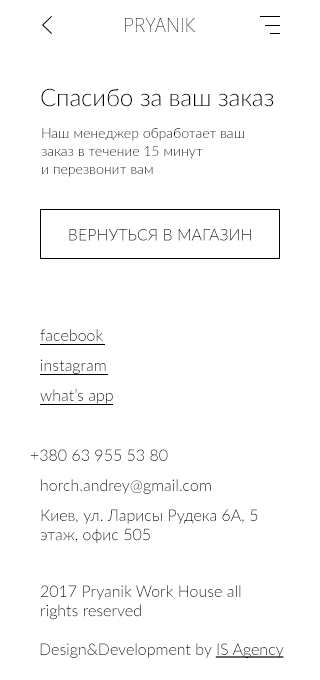
<style>
.page{position:relative;width:320px;height:680px;background:#ffffff}
.page>*{position:absolute;margin:0}
.t1{font:24px "Lato-Light";color:#000000}
.t2{font:14px/18px "Lato-Light";color:#000000}
.t3{font:16px "Lato-Light";text-transform:uppercase}
.t4{font:16px "Lato-Light"}
.t5{font:16px "Lato-Light";color:#000000}
.t6{font:16px "Lato-Light";color:#000000;text-decoration:underline}
</style>
<div class="page">
<p class="t1" style="left:41px;top:88px;width:233px;height:19px">Спасибо за ваш заказ</p>
<p class="t2" style="left:41px;top:128px;width:203px;height:49px">Наш менеджер обработает ваш заказ в течение 15 минут <br>и перезвонит вам</p>
<p class="t3" style="left:69px;top:229px;width:182px;height:12px">Вернуться в магазин</p>
<p class="t4" style="left:40px;top:329px;width:63px;height:12px">facebook</p>
<p class="t4" style="left:41px;top:359px;width:65px;height:15px">instagram</p>
<p class="t4" style="left:40px;top:389px;width:73px;height:15px">what’s app</p>
<p class="t4" style="left:30px;top:449px;width:138px;height:12px">+380 63 955 53 80</p>
<p class="t4" style="left:41px;top:479px;width:170px;height:15px">horch.andrey@gmail.com</p>
<p class="t5" style="left:40px;top:509px;width:218px;height:34px">Киев, ул. Ларисы Рудека 6А, 5 этаж, офис 505</p>
<p class="t5" style="left:41px;top:585px;width:200px;height:35px">2017 Pryanik Work House all rights reserved</p>
<p class="t5" style="left:40px;top:643px;width:244px;height:15px">Design&amp;Development by <span class="t6">IS Agency</span></p>
</div>
